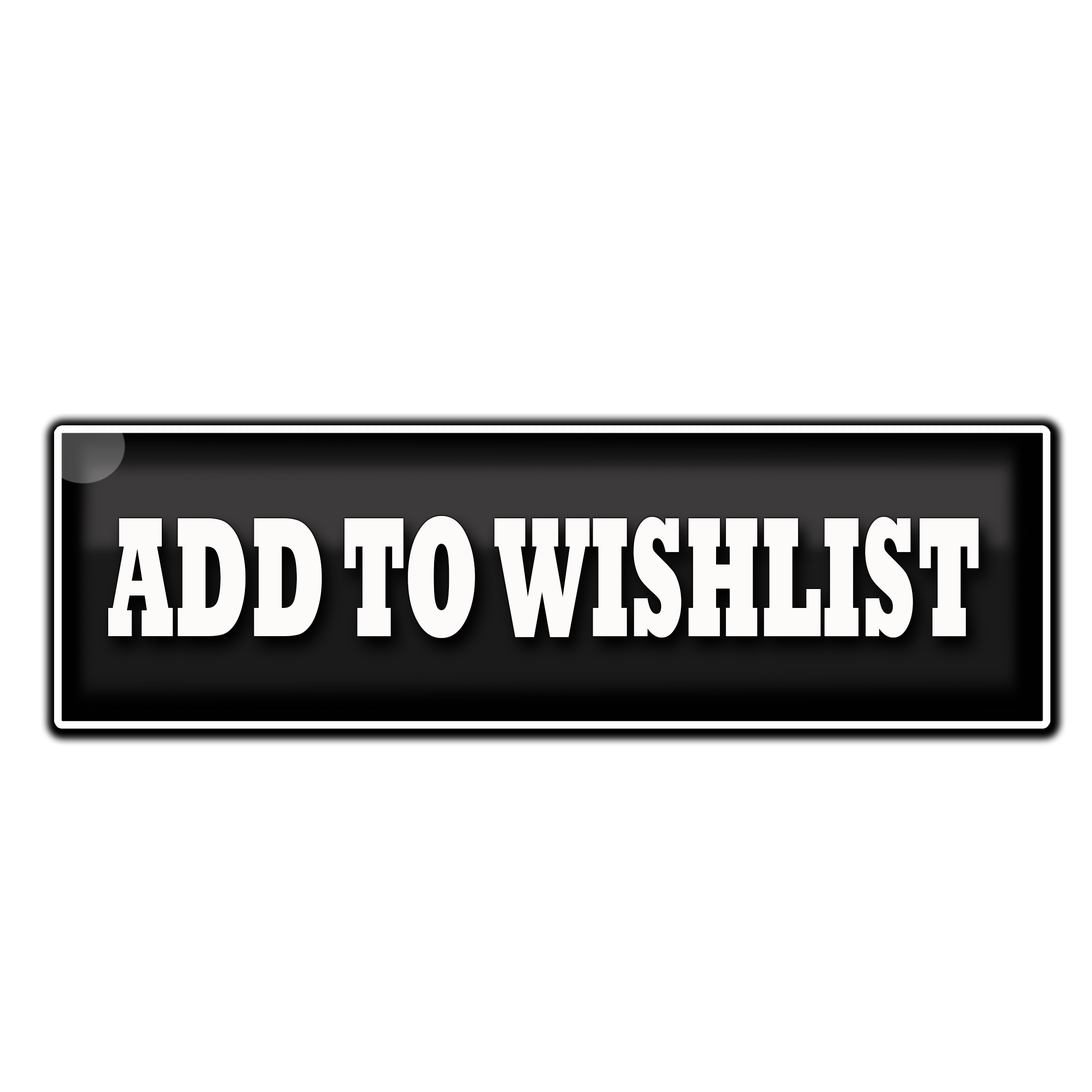
<style>
.page{position:relative;width:1092px;height:1092px;background:#ffffff}
.page>*{position:absolute;margin:0}
.t1{font:173.3px "Rockwell-ExtraBold";color:#fdfafa;scale:0.5 1}
</style>
<div class="page">
<p class="t1" style="left:108px;top:516px;width:871px;height:122px">ADD TO WISHLIST</p>
</div>
